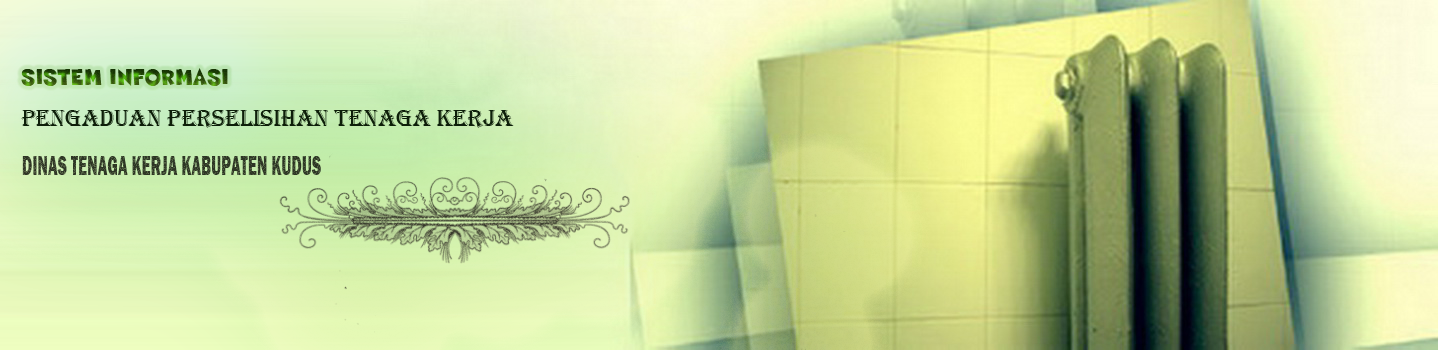
<style>
.page{position:relative;width:1438px;height:350px}
.page>*{position:absolute;margin:0}
.t1{font:24px "SneakerheadBTN"}
.t2{font:24px "Algerian";color:#0d1e09}
</style>
<div class="page">
<p class="t1" style="left:21px;top:68px;width:207px;height:18px">SISTEM INFORMASI</p>
<p class="t2" style="left:21px;top:110px;width:493px;height:18px">PENGADUAN PERSELISIHAN TENAGA KERJA</p>
</div>
